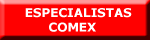
<style>
.page{position:relative;width:150px;height:40px;background:#ff0000}
.page>*{position:absolute;margin:0}
.t1{font:12px "Verdana-Bold";color:#ffffff}
</style>
<div class="page">
<p class="t1" style="left:25px;top:8px;width:107px;height:24px">ESPECIALISTAS<br>      COMEX</p>
</div>
